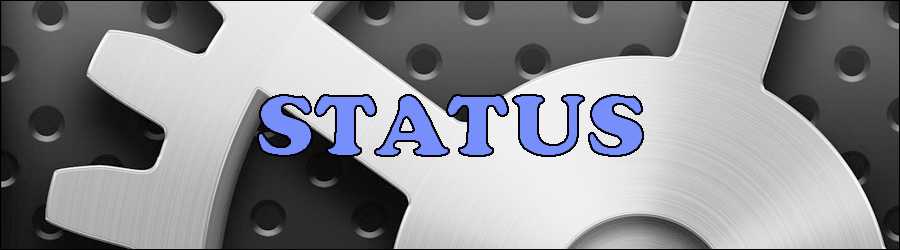
<style>
.page{position:relative;width:900px;height:250px}
.page>*{position:absolute;margin:0}
.t1{font:92px "CooperBlack";color:#778ffa}
</style>
<div class="page">
<p class="t1" style="left:257px;top:94px;width:387px;height:63px">STATUS</p>
</div>
